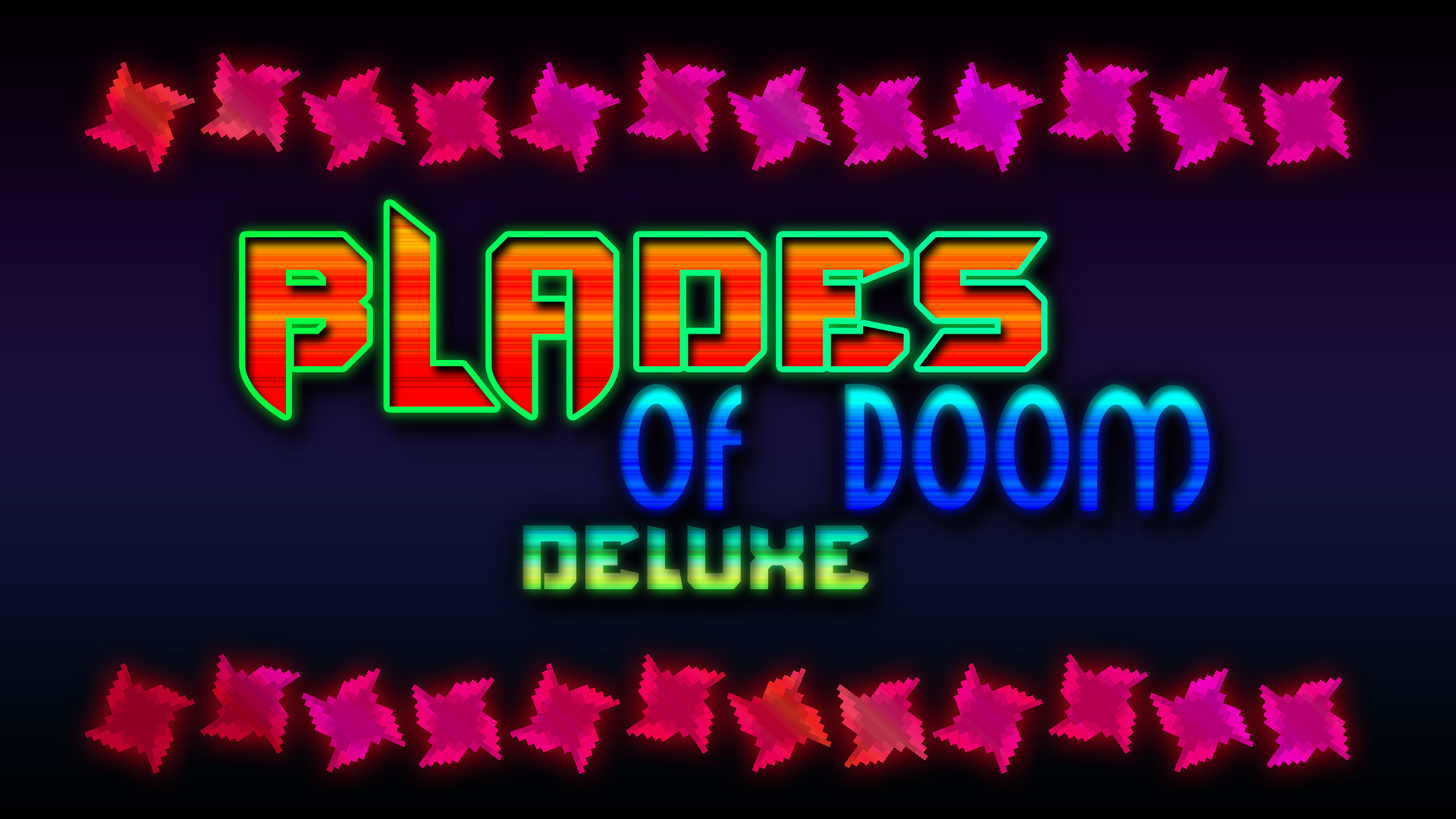
<style>
.page{position:relative;width:1456px;height:819px}
.page>*{position:absolute;margin:0}
.t1{font:177.2px "BravoDestroyerPersonalUSE-regular";letter-spacing:0.025em}
.t2{font:139.1px "Minerva";letter-spacing:0.025em}
.t3{font:87.6px "BravoDestroyerPersonalUSE-regular";letter-spacing:0.025em;scale:0.89 1}
</style>
<div class="page">
<p class="t1" style="left:245px;top:205px;width:797px;height:210px">BLADES</p>
<p class="t1" style="left:245px;top:205px;width:797px;height:210px">BLADES</p>
<p class="t2" style="left:619px;top:384px;width:591px;height:129px">OF DOOM</p>
<p class="t2" style="left:619px;top:384px;width:591px;height:129px">OF DOOM</p>
<p class="t3" style="left:522px;top:525px;width:347px;height:64px">Deluxe</p>
<p class="t3" style="left:522px;top:525px;width:347px;height:64px">Deluxe</p>
</div>
